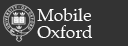
<style>
.page{position:relative;width:128px;height:46px;background:#333333}
.page>*{position:absolute;margin:0}
.t1{font:17.5px/16.2px "Palatino-Roman";color:#ffffff}
</style>
<div class="page">
<p class="t1" style="left:37px;top:8px;width:56px;height:30px">Mobile <br>Oxford</p>
</div>
